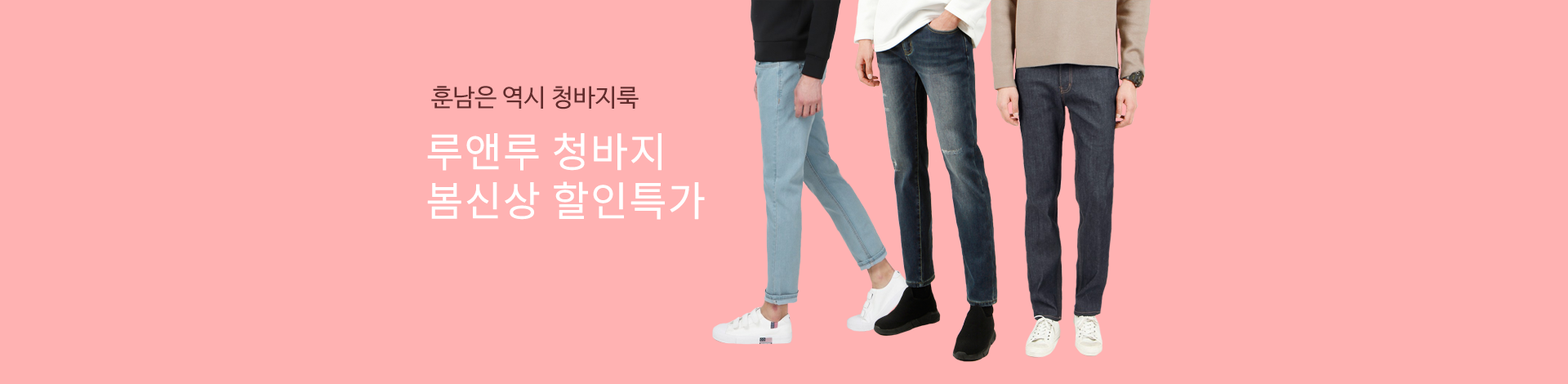
<style>
.page{position:relative;width:1568px;height:384px;background:#ffb2b2}
.page>*{position:absolute;margin:0}
.t1{font:24.5px "NanumBarunGothic";color:#622c2c}
.t2{font:40.8px "NotoSansCJKkr-DemiLight";color:#ffffff;font-weight:bold}
</style>
<div class="page">
<p class="t1" style="left:431px;top:86px;width:208px;height:23px">훈남은 역시 청바지룩</p>
<p class="t2" style="left:427px;top:132px;width:278px;height:88px">루앤루 청바지 <br>봄신상 할인특가</p>
</div>
